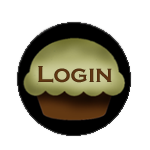
<style>
.page{position:relative;width:150px;height:150px;background:#ffffff}
.page>*{position:absolute;margin:0}
.t1{font:24px "CopperplateGothic-Bold";color:#623812}
</style>
<div class="page">
<p class="t1" style="left:38px;top:66px;width:74px;height:17px">Login</p>
</div>
